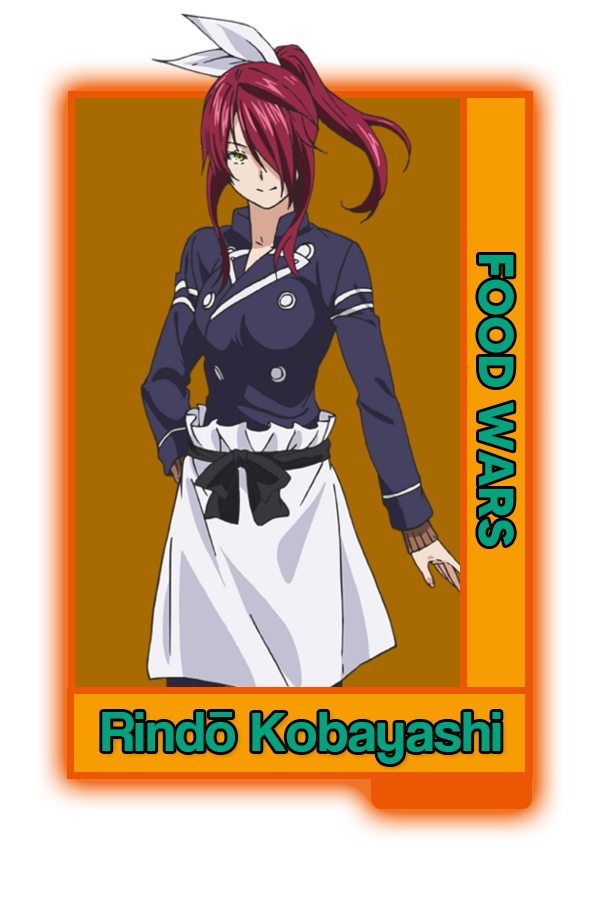
<style>
.page{position:relative;width:600px;height:900px;background:#ffffff}
.page>*{position:absolute;margin:0}
.t1{font:48.8px "MADETOMMY-Bold";color:#009f7b}
.t2{font:58.3px "CoolveticaRg-Regular";color:#009f7b}
</style>
<div class="page">
<p class="t1" style="left:478px;top:255px;width:36px;height:291px;rotate:90deg">FOOD WARS</p>
<p class="t2" style="left:102px;top:712px;width:399px;height:52px">Rindō Kobayashi</p>
</div>
